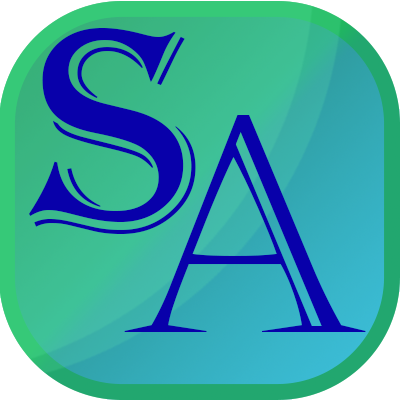
<style>
.page{position:relative;width:400px;height:400px}
.page>*{position:absolute;margin:0}
.t1{font:300px "Algerian";color:#0800aa}
.t2{font:300px "Castellar";letter-spacing:0.16em;color:#0800aa}
</style>
<div class="page">
<p class="t1" style="left:29px;top:28px;width:167px;height:206px">S</p>
<p class="t2" style="left:124px;top:115px;width:242px;height:217px">A</p>
</div>
